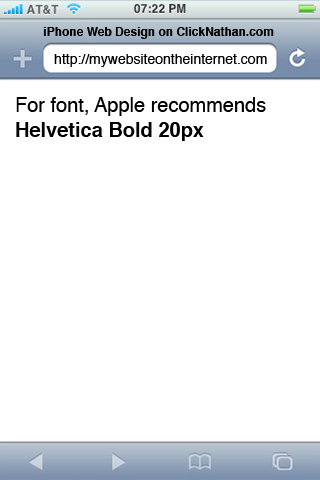
<style>
.page{position:relative;width:320px;height:480px;background:#ffffff}
.page>*{position:absolute;margin:0}
.t1{font:12px "Helvetica-Bold";color:#000000}
.t2{font:14px "Helvetica";color:#000000}
.t3{font:20px/19px "Helvetica";color:#000000}
.t4{font:20px/19px "Helvetica-Bold";color:#000000}
</style>
<div class="page">
<p class="t1" style="left:43px;top:27px;width:231px;height:12px">iPhone Web Design on ClickNathan.com</p>
<p class="t2" style="left:54px;top:54px;width:213px;height:13px">http://mywebsiteontheinternet.com</p>
<p class="t3" style="left:16px;top:97px;width:250px;height:44px">For font, Apple recommends<br><span class="t4">Helvetica Bold 20px</span></p>
</div>
